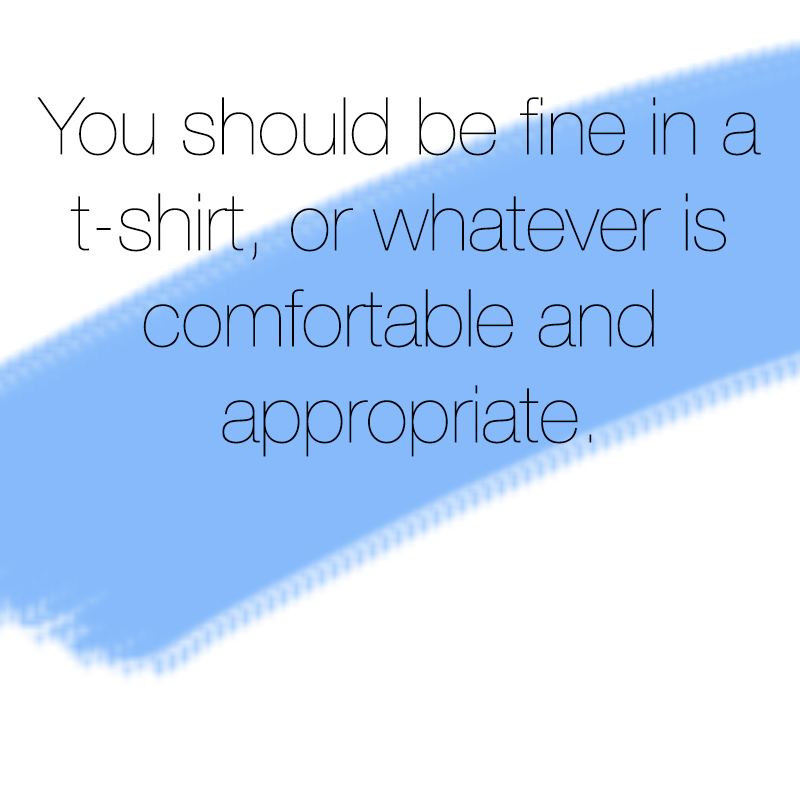
<style>
.page{position:relative;width:800px;height:800px;background:#ffffff}
.page>*{position:absolute;margin:0}
.t1{font:80px "HelveticaNeue-UltraLight";color:#000000}
</style>
<div class="page">
<p class="t1" style="left:37px;top:97px;width:724px;height:360px;text-align:center">You should be fine in a <br>t-shirt, or whatever is <br>comfortable and <br>appropriate.</p>
</div>
